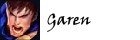
<style>
.page{position:relative;width:140px;height:40px;background:#ffffff}
.page>*{position:absolute;margin:0}
.t1{font:12px "VinerHandITC";color:#000000}
</style>
<div class="page">
<p class="t1" style="left:47px;top:13px;width:44px;height:19px">Garen</p>
</div>
